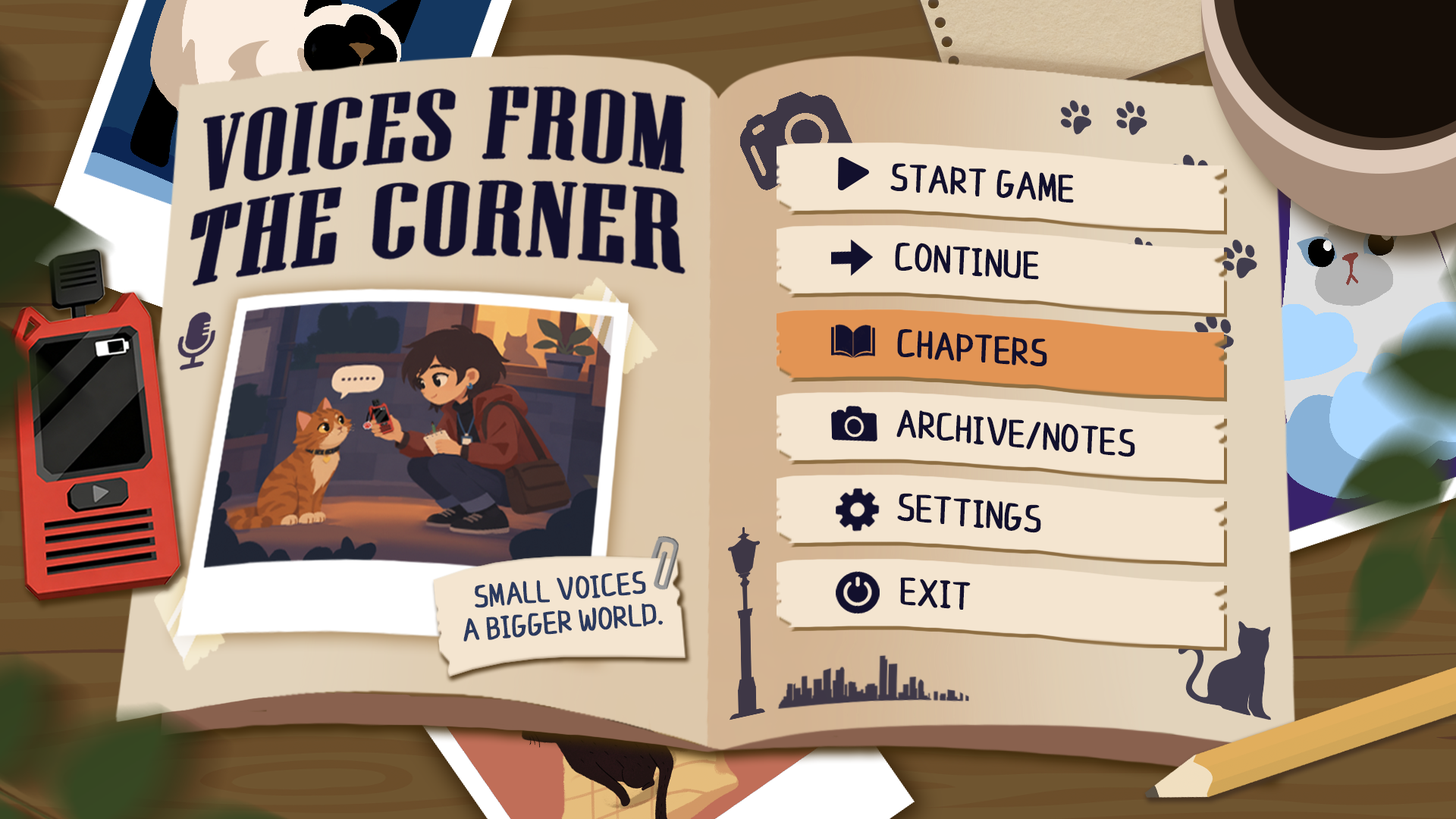
<style>
.page{position:relative;width:1456px;height:819px}
.page>*{position:absolute;margin:0}
.t1{font:41.9px "HaiYanXingQiuBianLiDian";letter-spacing:-0.025em;color:#12102d;text-transform:uppercase;font-weight:bold}
</style>
<div class="page">
<p class="t1" style="left:890px;top:163px;width:184px;height:40px;rotate:4deg">start game</p>
<p class="t1" style="left:895px;top:243px;width:144px;height:37px;rotate:4deg">continue</p>
<p class="t1" style="left:897px;top:329px;width:150px;height:37px;rotate:4deg">chapters</p>
<p class="t1" style="left:896px;top:409px;width:239px;height:48px;rotate:5deg">archive/notes</p>
<p class="t1" style="left:897px;top:493px;width:144px;height:40px;rotate:5deg">settings</p>
<p class="t1" style="left:900px;top:577px;width:71px;height:33px;rotate:5deg">exit</p>
</div>
